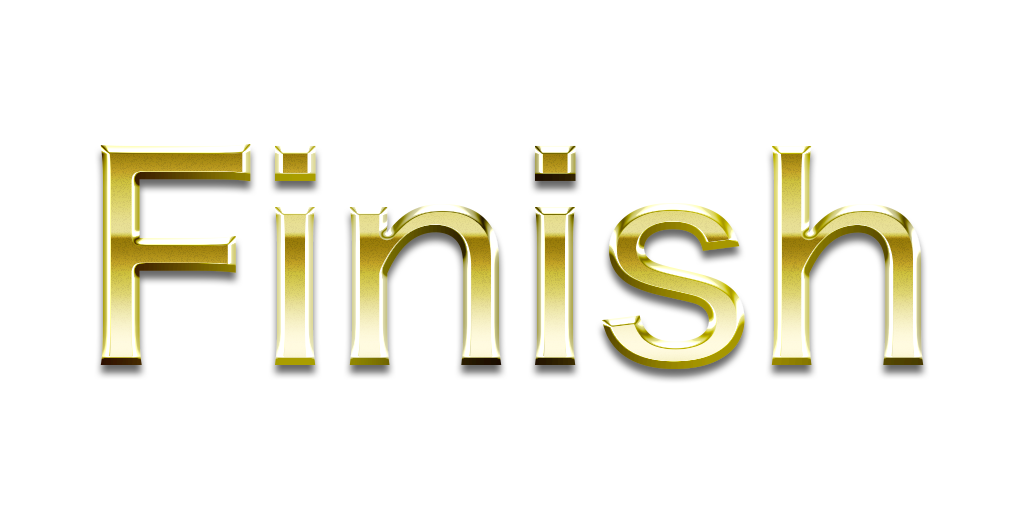
<style>
.page{position:relative;width:1024px;height:512px;background:#ffffff}
.page>*{position:absolute;margin:0}
.t1{font:275px "HiraKakuProN-W6"}
</style>
<div class="page">
<p class="t1" style="left:100px;top:144px;width:824px;height:225px">Finish</p>
</div>
